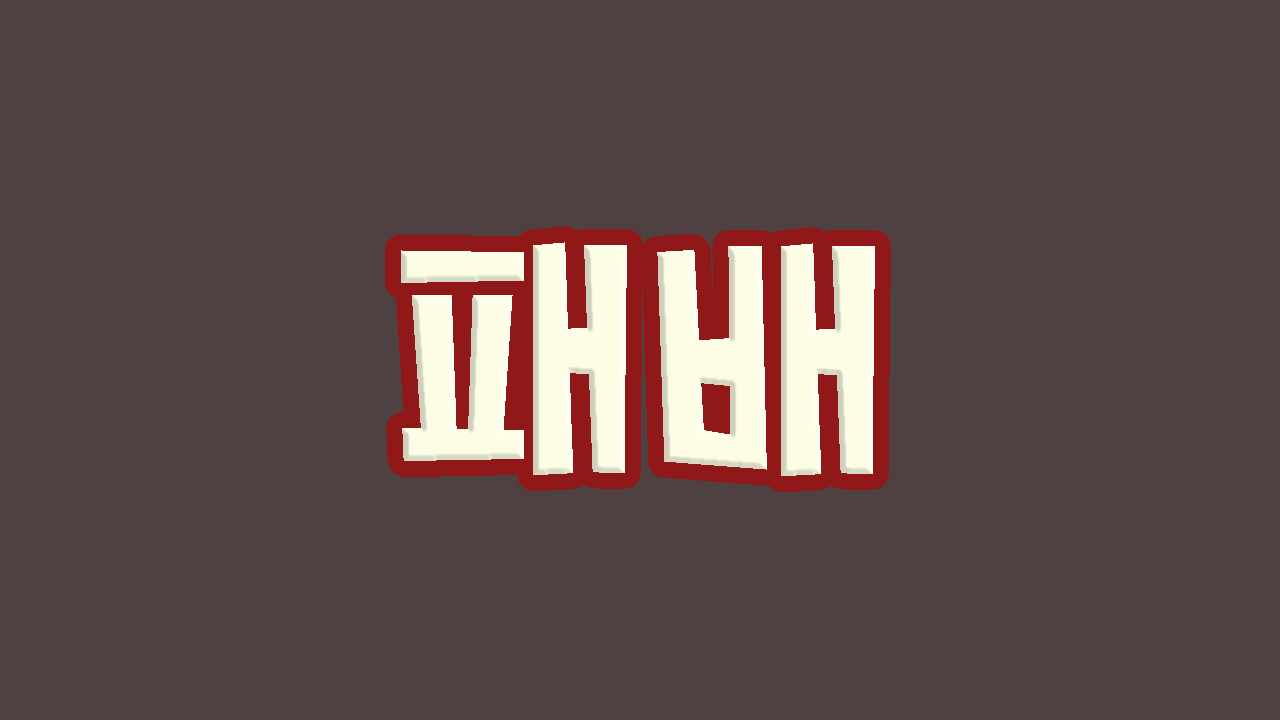
<style>
.page{position:relative;width:1280px;height:720px;background:#4f4042}
.page>*{position:absolute;margin:0}
.t1{font:248.4px "HoonJumboB";color:#fcfde4}
</style>
<div class="page">
<p class="t1" style="left:401px;top:242px;width:474px;height:234px">패배</p>
</div>
